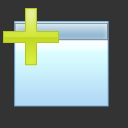
<style>
.page{position:relative;width:128px;height:128px;background:#333333}
.page>*{position:absolute;margin:0}
.t1{font:129px "Courier-Bold"}
</style>
<div class="page">
<p class="t1" style="left:3px;top:8px;width:56px;height:58px">+</p>
</div>
